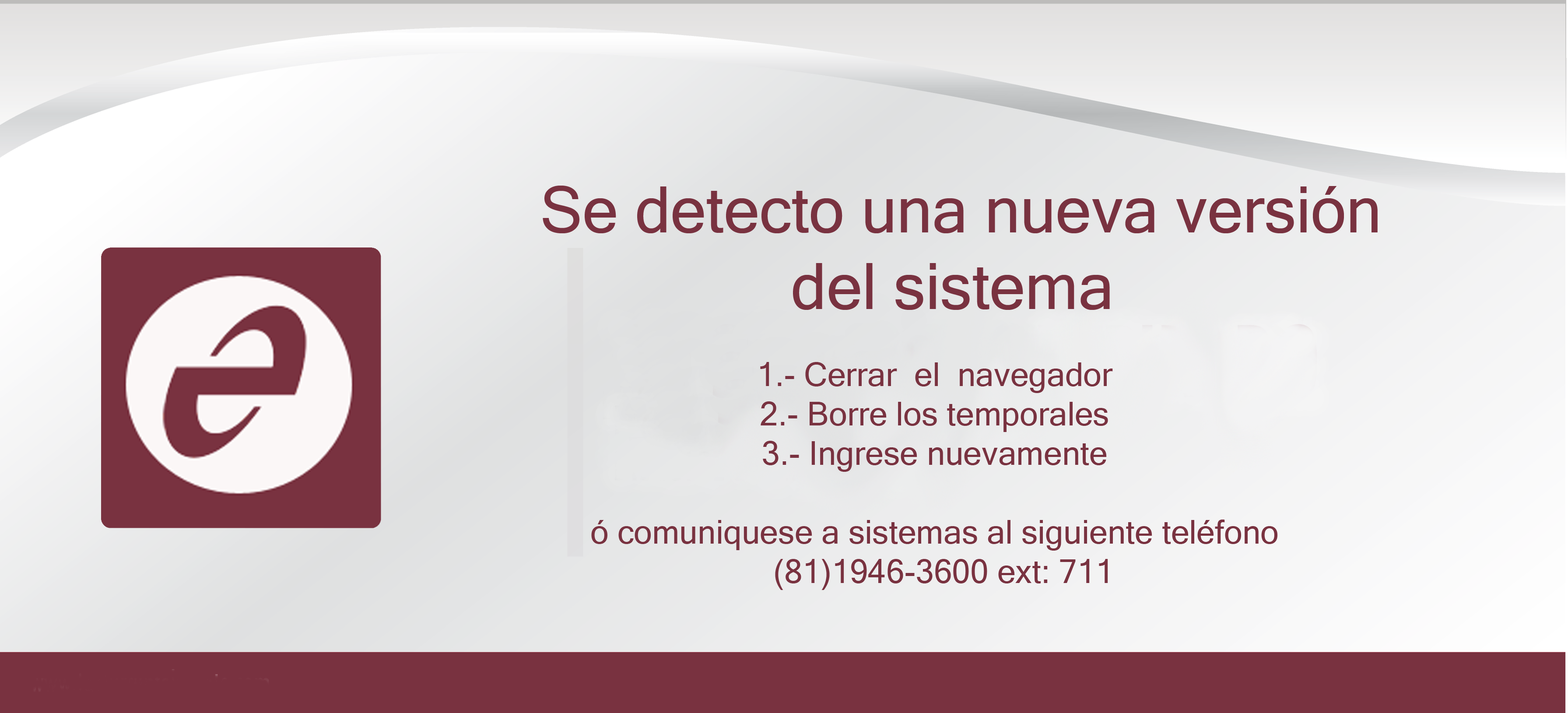
<style>
.page{position:relative;width:1568px;height:713px}
.page>*{position:absolute;margin:0}
.t1{font:63.8px "MicrosoftSansSerif";color:#793240}
.t2{font:32.8px "MicrosoftSansSerif";color:#793240}
</style>
<div class="page">
<p class="t1" style="left:543px;top:186px;width:835px;height:124px;text-align:center">Se detecto una nueva versión<br>del sistema</p>
<p class="t2" style="left:591px;top:362px;width:687px;height:228px;text-align:center">1.- Cerrar  el  navegador<br>2.- Borre los temporales<br>3.- Ingrese nuevamente<br><br>ó comuniquese a sistemas al siguiente teléfono<br>  (81)1946-3600 ext: 711</p>
</div>
